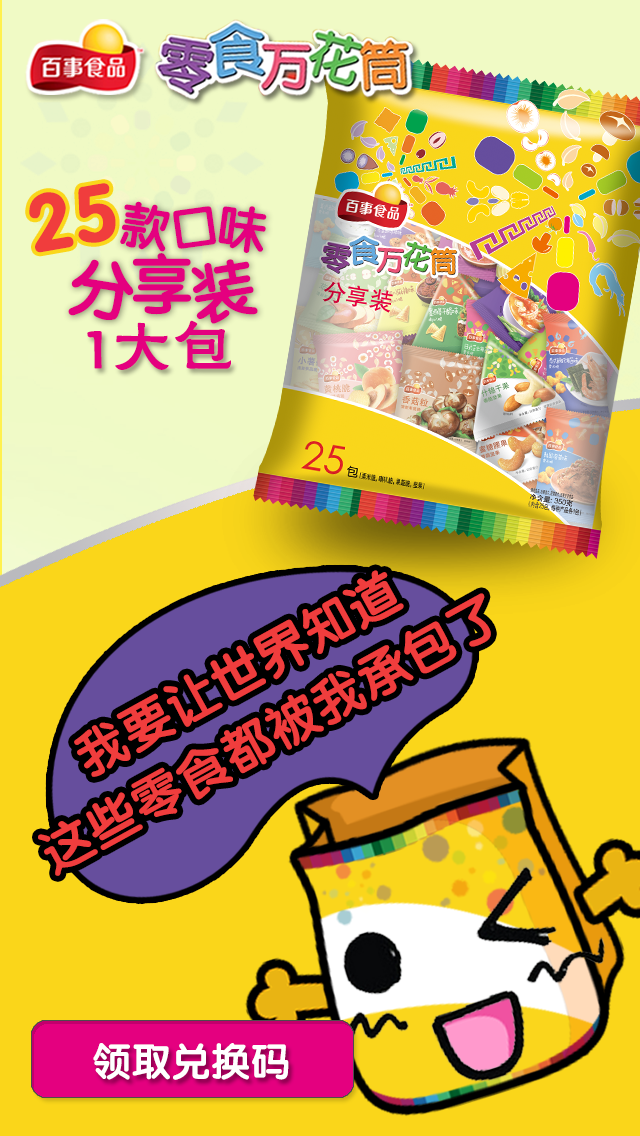
<style>
.page{position:relative;width:640px;height:1136px}
.page>*{position:absolute;margin:0}
.t1{font:80.4px "FZY4JW--GB1-0";color:#f03d3d}
.t2{font:50.3px "FZY4JW--GB1-0";color:#e4007f}
.t3{font:65.1px "FZY4JW--GB1-0";color:#e4007f}
.t4{font:62.3px "FZHLJW--GB1-0";color:#e4007f}
.t5{font:51.5px/68.7px "FZY4JW--GB1-0";color:#f03d3d}
.t6{font:39.1px "FZY4JW--GB1-0";color:#ffffff}
</style>
<div class="page">
<p class="t1" style="left:29px;top:183px;width:87px;height:70px;rotate:-10deg">25</p>
<p class="t2" style="left:120px;top:201px;width:50px;height:51px;rotate:9deg">款</p>
<p class="t2" style="left:173px;top:206px;width:43px;height:43px;rotate:-8deg">口</p>
<p class="t2" style="left:218px;top:206px;width:49px;height:47px;rotate:8deg">味</p>
<p class="t3" style="left:132px;top:253px;width:60px;height:62px">享</p>
<p class="t3" style="left:68px;top:259px;width:66px;height:61px;rotate:9deg">分</p>
<p class="t3" style="left:191px;top:259px;width:67px;height:65px;rotate:-10deg">装</p>
<p class="t4" style="left:87px;top:320px;width:144px;height:50px">1大包</p>
<p class="t5" style="left:38px;top:570px;width:453px;height:306px;text-align:center;rotate:-29deg">我要让世界知道<br>这些零食都被我承包了</p>
<p class="t6" style="left:93px;top:1043px;width:196px;height:37px">领取兑换码</p>
</div>
